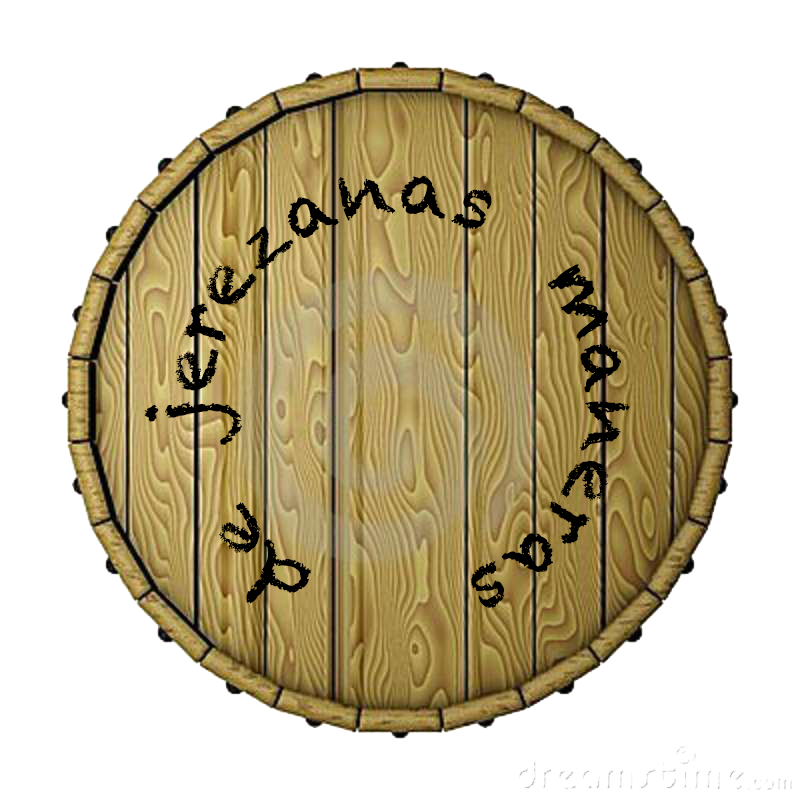
<style>
.page{position:relative;width:800px;height:800px;background:#ffffff}
.page>*{position:absolute;margin:0}
.t1{font:75px "Chalkduster";color:#000000}
</style>
<div class="page">
<p class="t1" style="left:144px;top:175px;width:486px;height:433px">de  jerezanas  maneras</p>
</div>
